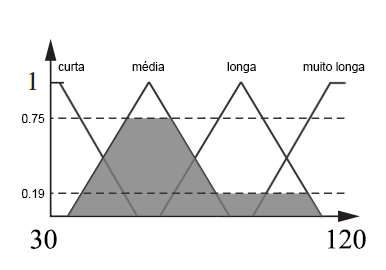
<style>
.page{position:relative;width:386px;height:270px;background:#ffffff}
.page>*{position:absolute;margin:0}
.t1{font:12px "ArialMT";color:#000000}
.t2{font:28px "TimesNewRomanPSMT";color:#000000}
</style>
<div class="page">
<p class="t1" style="left:58px;top:62px;width:27px;height:9px">curta</p>
<p class="t1" style="left:132px;top:61px;width:33px;height:10px">média</p>
<p class="t1" style="left:227px;top:62px;width:29px;height:11px">longa</p>
<p class="t1" style="left:303px;top:62px;width:62px;height:11px">muito longa</p>
<p class="t1" style="left:21px;top:114px;width:24px;height:9px">0.75</p>
<p class="t1" style="left:21px;top:189px;width:24px;height:9px">0.19</p>
<p class="t2" style="left:30px;top:229px;width:27px;height:20px">30</p>
<p class="t2" style="left:327px;top:229px;width:39px;height:20px">120</p>
</div>
